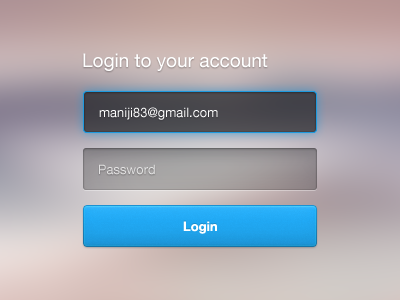
<style>
.page{position:relative;width:400px;height:300px}
.page>*{position:absolute;margin:0}
.t1{font:19px "HelveticaNeueLT-Roman";color:#ffffff}
.t2{font:13px "HelveticaNeueLT-Roman";color:#ffffff}
.t3{font:13px "HelveticaNeueLT-Roman";color:#e3e2e2}
.t4{font:13px "HelveticaNeueLT-Bold";color:#ffffff}
</style>
<div class="page">
<p class="t1" style="left:83px;top:53px;width:185px;height:18px">Login to your account</p>
<p class="t2" style="left:99px;top:107px;width:119px;height:13px">maniji83@gmail.com</p>
<p class="t3" style="left:99px;top:164px;width:56px;height:11px">Password</p>
<p class="t4" style="left:183px;top:221px;width:34px;height:13px">Login</p>
</div>
